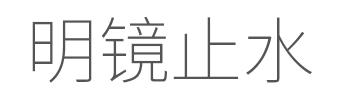
<style>
.page{position:relative;width:340px;height:100px;background:#ffffff}
.page>*{position:absolute;margin:0}
.t1{font:72px "SourceHanSansCN-ExtraLight";color:#555555}
</style>
<div class="page">
<p class="t1" style="left:32px;top:16px;width:280px;height:67px">明镜止水</p>
</div>
